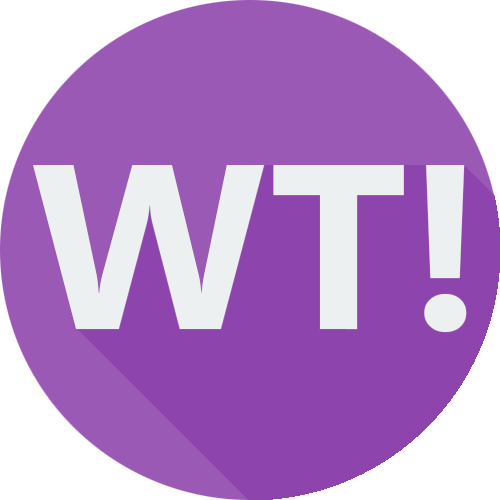
<style>
.page{position:relative;width:500px;height:500px;background:#9b59b6}
.page>*{position:absolute;margin:0}
.t1{font:234.3px "SegoeUI-Bold";color:#ecf0f1}
</style>
<div class="page">
<p class="t1" style="left:33px;top:165px;width:434px;height:167px">WT!</p>
</div>
